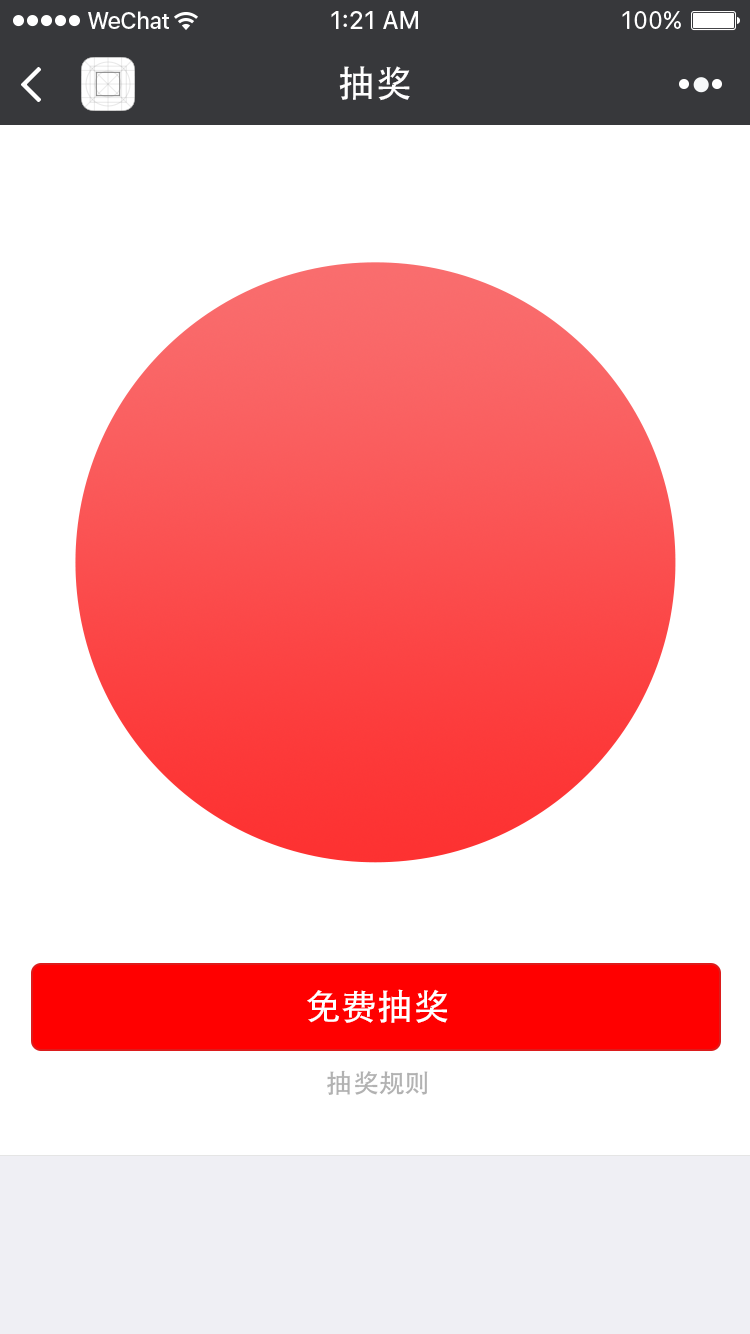
<style>
.page{position:relative;width:750px;height:1334px;background:#ffffff}
.page>*{position:absolute;margin:0}
.t1{font:37px "AdobeHeitiStd-Regular";color:#ffffff}
.t2{font:36px "AdobeHeitiStd-Regular";color:#ffffff}
.t3{font:26px "AdobeHeitiStd-Regular";color:#b2b2b2}
</style>
<div class="page">
<p class="t1" style="left:339px;top:66px;width:71px;height:35px">抽奖</p>
<p class="t2" style="left:307px;top:989px;width:141px;height:34px">免费抽奖</p>
<p class="t3" style="left:327px;top:1070px;width:101px;height:25px">抽奖规则</p>
</div>
